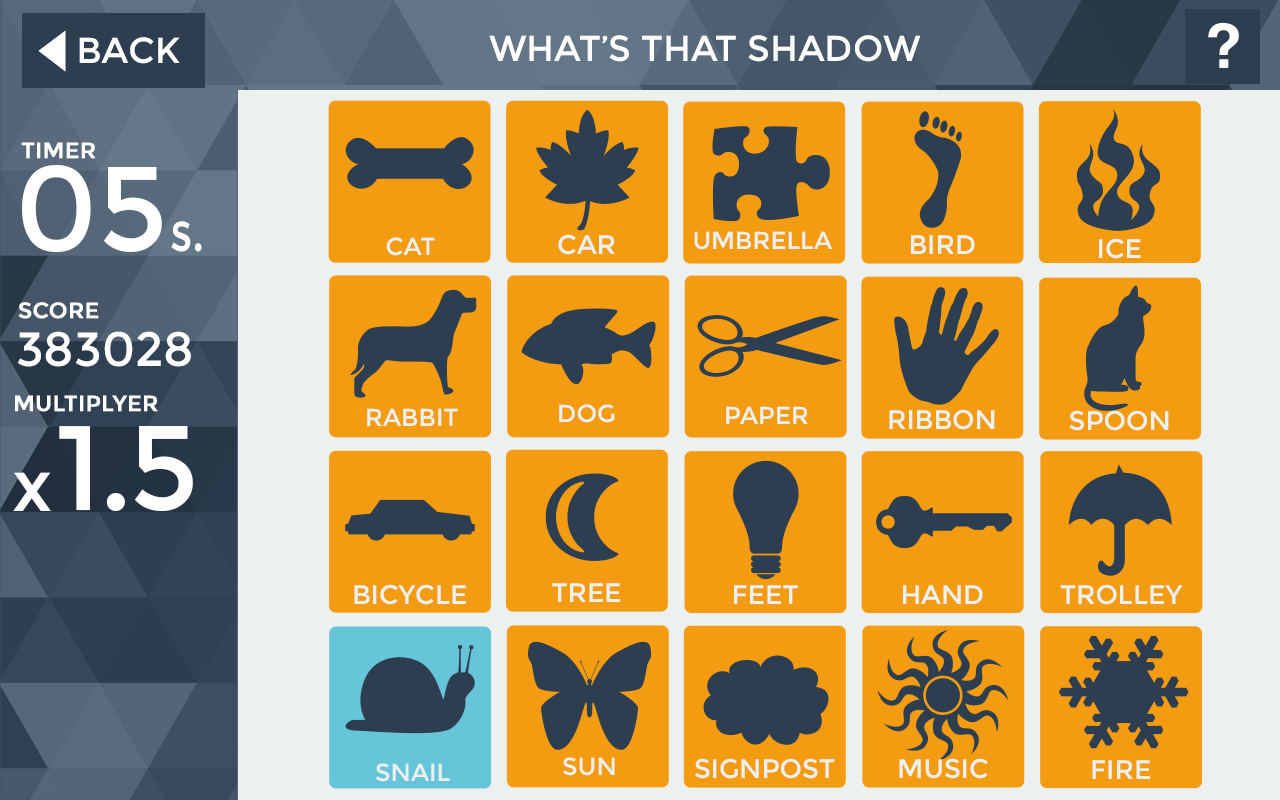
<style>
.page{position:relative;width:1280px;height:800px;background:#f39c11}
.page>*{position:absolute;margin:0}
.t1{font:36px "Montserrat-Regular";color:#ffffff}
.t2{font:36px "Montserrat-Regular";color:#ffffff;text-transform:uppercase}
.t3{font:22px "Montserrat-Regular";color:#ffffff;font-weight:bold}
.t4{font:120px "Montserrat-Regular";color:#ffffff}
.t5{font:55px "Montserrat-Regular";color:#ffffff;scale:0.8 1}
.t6{font:24.5px "Montserrat-Regular";color:#ecf0f1;text-transform:uppercase}
.t7{font:26.7px "Montserrat-Regular";color:#ecf0f1;text-transform:uppercase}
.t8{font:48px "Montserrat-Regular";color:#ffffff}
.t9{font:120px "Montserrat-Regular";letter-spacing:-0.025em;color:#ffffff}
.t10{font:72px "Montserrat-Regular";color:#ffffff}
</style>
<div class="page">
<p class="t1" style="left:79px;top:37px;width:101px;height:27px">BACK</p>
<p class="t2" style="left:489px;top:35px;width:432px;height:27px">What’s that shadow</p>
<p class="t3" style="left:21px;top:142px;width:75px;height:17px">TIMER</p>
<p class="t4" style="left:22px;top:165px;width:140px;height:87px">05</p>
<p class="t5" style="left:171px;top:221px;width:31px;height:31px">s.</p>
<p class="t6" style="left:694px;top:231px;width:139px;height:19px">umbrella</p>
<p class="t6" style="left:386px;top:237px;width:49px;height:19px">cat</p>
<p class="t7" style="left:558px;top:234px;width:57px;height:21px">car</p>
<p class="t7" style="left:911px;top:235px;width:64px;height:19px">bird</p>
<p class="t7" style="left:1099px;top:238px;width:42px;height:21px">ice</p>
<p class="t3" style="left:18px;top:302px;width:81px;height:17px">SCORE</p>
<p class="t8" style="left:17px;top:331px;width:174px;height:36px">383028</p>
<p class="t3" style="left:15px;top:395px;width:143px;height:17px">MULTIPLYER</p>
<p class="t6" style="left:367px;top:408px;width:91px;height:18px">rabbit</p>
<p class="t6" style="left:559px;top:404px;width:56px;height:19px">dog</p>
<p class="t6" style="left:726px;top:406px;width:82px;height:18px">paper</p>
<p class="t7" style="left:889px;top:409px;width:106px;height:21px">ribbon</p>
<p class="t7" style="left:1069px;top:410px;width:100px;height:21px">spoon</p>
<p class="t9" style="left:59px;top:426px;width:134px;height:85px">1.5</p>
<p class="t10" style="left:13px;top:472px;width:38px;height:39px">x</p>
<p class="t7" style="left:354px;top:584px;width:112px;height:21px">bicycle</p>
<p class="t7" style="left:552px;top:583px;width:68px;height:19px">tree</p>
<p class="t7" style="left:734px;top:585px;width:64px;height:19px">feet</p>
<p class="t7" style="left:903px;top:585px;width:80px;height:19px">hand</p>
<p class="t7" style="left:1060px;top:584px;width:123px;height:21px">trolley</p>
<p class="t6" style="left:563px;top:757px;width:52px;height:19px">Sun</p>
<p class="t7" style="left:695px;top:758px;width:140px;height:21px">signpost</p>
<p class="t7" style="left:899px;top:758px;width:89px;height:21px">music</p>
<p class="t7" style="left:1092px;top:760px;width:58px;height:19px">fire</p>
<p class="t6" style="left:376px;top:763px;width:74px;height:19px">snail</p>
</div>
